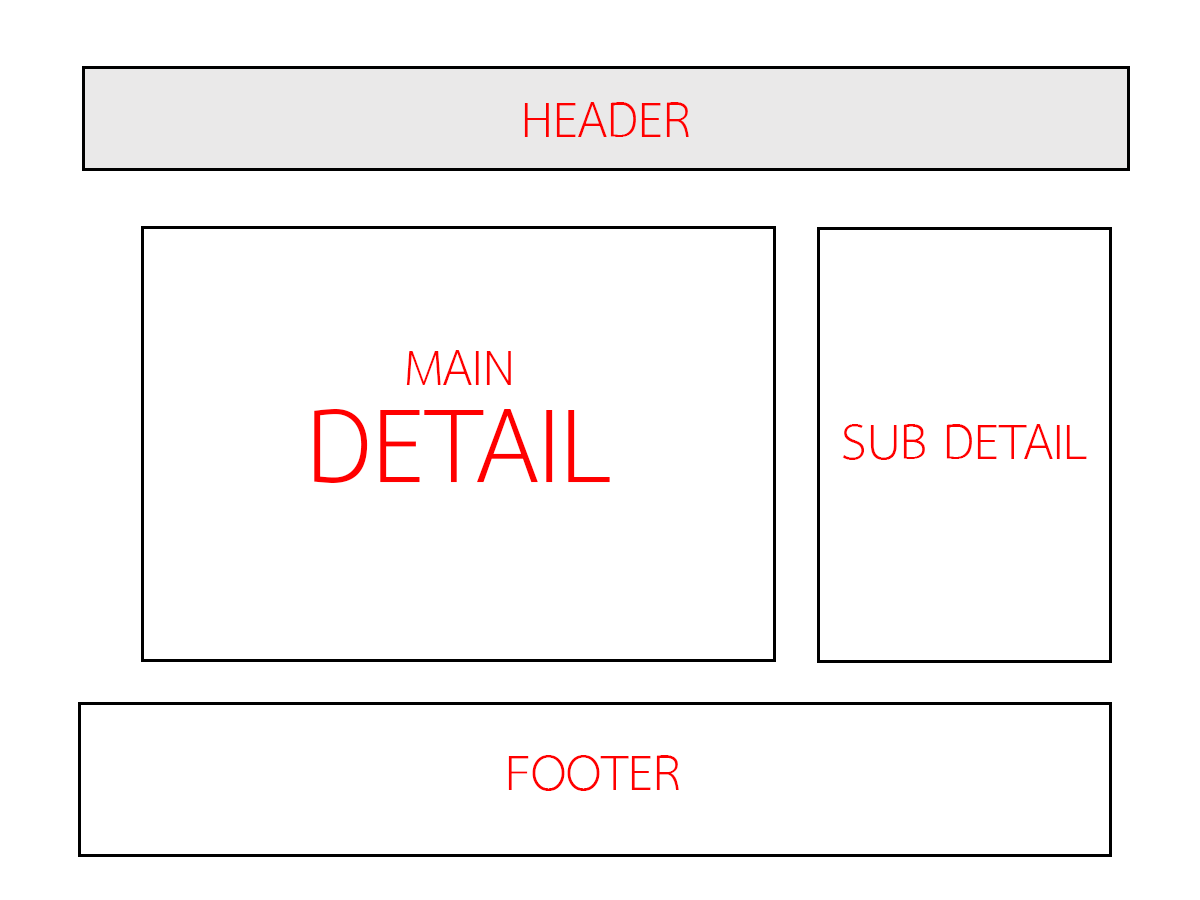
<style>
.page{position:relative;width:1200px;height:900px;background:#ffffff}
.page>*{position:absolute;margin:0}
.t1{font:72px "THSarabunPSK";color:#ff0000;text-transform:uppercase}
.t2{font:152px "THSarabunPSK";color:#ff0000;text-transform:uppercase}
</style>
<div class="page">
<p class="t1" style="left:524px;top:102px;width:165px;height:35px">Header</p>
<p class="t1" style="left:406px;top:350px;width:105px;height:35px">Main</p>
<p class="t2" style="left:314px;top:409px;width:296px;height:74px">Detail</p>
<p class="t1" style="left:842px;top:424px;width:245px;height:36px">Sub Detail</p>
<p class="t1" style="left:508px;top:755px;width:171px;height:36px">footer</p>
</div>
